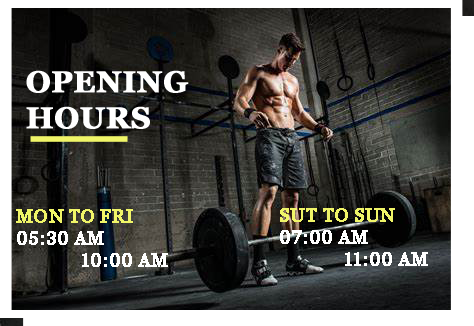
<style>
.page{position:relative;width:474px;height:326px}
.page>*{position:absolute;margin:0}
.t1{font:30px "Georgia-Bold";color:#ffffff;text-transform:uppercase;font-weight:bold}
.t2{font:18px "Georgia";color:#ffffff;text-transform:uppercase;font-weight:bold}
.t3{font:18px "Georgia";color:#f0f568;text-transform:uppercase;font-weight:bold}
</style>
<div class="page">
<p class="t1" style="left:26px;top:70px;width:163px;height:59px">opening<br>hours</p>
<p class="t2" style="left:16px;top:209px;width:152px;height:58px"><span class="t3">mon to fri<br></span>05:30 Am<br>             10:00 am</p>
<p class="t2" style="left:280px;top:208px;width:148px;height:58px"><span class="t3">sut to sun<br></span>07:00 Am<br>             11:00 am</p>
</div>
